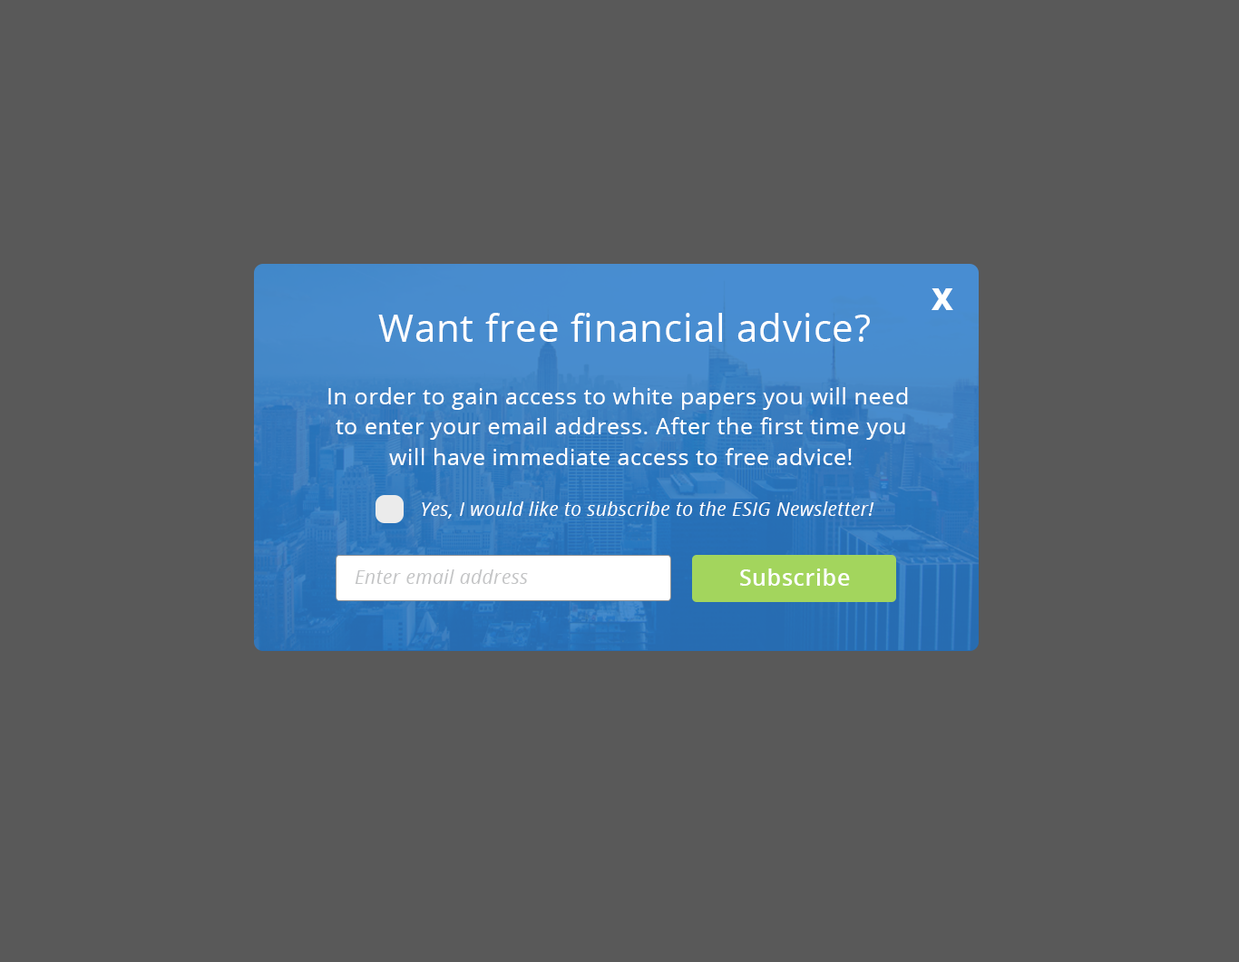
<style>
.page{position:relative;width:1239px;height:962px;background:#595959}
.page>*{position:absolute;margin:0}
.t1{font:30.2px "OpenSans-Extrabold";letter-spacing:0.025em;color:#ffffff}
.t2{font:37.8px "OpenSans";letter-spacing:0.025em;color:#ffffff}
.t3{font:22.7px/30.2px "OpenSans";letter-spacing:0.025em;color:#ffffff}
.t4{font:18.9px "OpenSans-Italic";letter-spacing:0.025em;color:#ffffff}
.t5{font:18.9px "OpenSans-Italic";letter-spacing:0.025em;color:#c3c4c5}
.t6{font:22.7px "OpenSans-Semibold";letter-spacing:0.025em;color:#ffffff}
</style>
<div class="page">
<p class="t1" style="left:932px;top:288px;width:21px;height:22px">X</p>
<p class="t2" style="left:378px;top:313px;width:492px;height:29px">Want free financial advice?</p>
<p class="t3" style="left:328px;top:387px;width:580px;height:78px;text-align:center">In order to gain access to white papers you will need <br>to enter your email address. After the first time you<br>will have immediate access to free advice!</p>
<p class="t4" style="left:422px;top:502px;width:452px;height:17px">Yes, I would like to subscribe to the ESIG Newsletter!</p>
<p class="t5" style="left:355px;top:570px;width:173px;height:14px">Enter email address</p>
<p class="t6" style="left:740px;top:569px;width:110px;height:17px">Subscribe</p>
</div>
